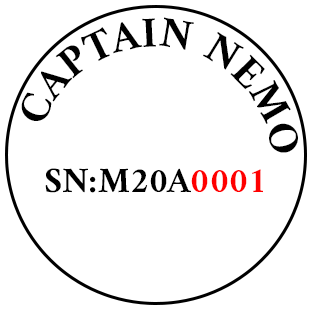
<style>
.page{position:relative;width:310px;height:310px;background:#ffffff}
.page>*{position:absolute;margin:0}
.t1{font:43.8px "Amiri-Bold";color:#000000}
.t2{font:36px "Amiri-Bold";color:#000000}
.t3{font:36px "Amiri-Bold";color:#ff0000}
</style>
<div class="page">
<p class="t1" style="left:21px;top:17px;width:277px;height:136px;rotate:-69deg">CAPTAIN NEMO</p>
<p class="t2" style="left:45px;top:168px;width:218px;height:25px">SN:M20A<span class="t3">0001</span></p>
</div>
